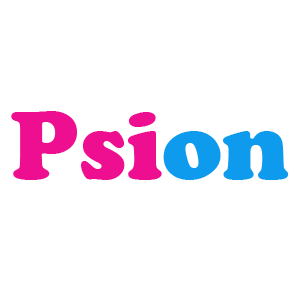
<style>
.page{position:relative;width:300px;height:300px;background:#ffffff}
.page>*{position:absolute;margin:0}
.t1{font:100px "CooperBlack";color:#ed0f90}
.t2{font:100px "CooperBlack";color:#0e9bed}
</style>
<div class="page">
<p class="t1" style="left:11px;top:111px;width:278px;height:69px">Psi<span class="t2">on</span></p>
</div>
